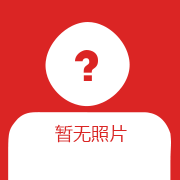
<style>
.page{position:relative;width:180px;height:180px;background:#db2524}
.page>*{position:absolute;margin:0}
.t1{font:18px "MicrosoftYaHei";color:#db2524}
</style>
<div class="page">
<p class="t1" style="left:55px;top:124px;width:72px;height:19px">暂无照片</p>
</div>
